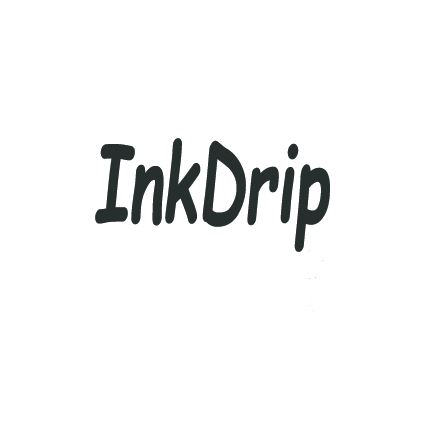
<style>
.page{position:relative;width:422px;height:422px;background:#ffffff}
.page>*{position:absolute;margin:0}
.t1{font:106.2px "ComicSansMS-BoldItalic";color:#28302e;scale:0.61 1}
</style>
<div class="page">
<p class="t1" style="left:95px;top:138px;width:235px;height:114px">InkDrip</p>
</div>
